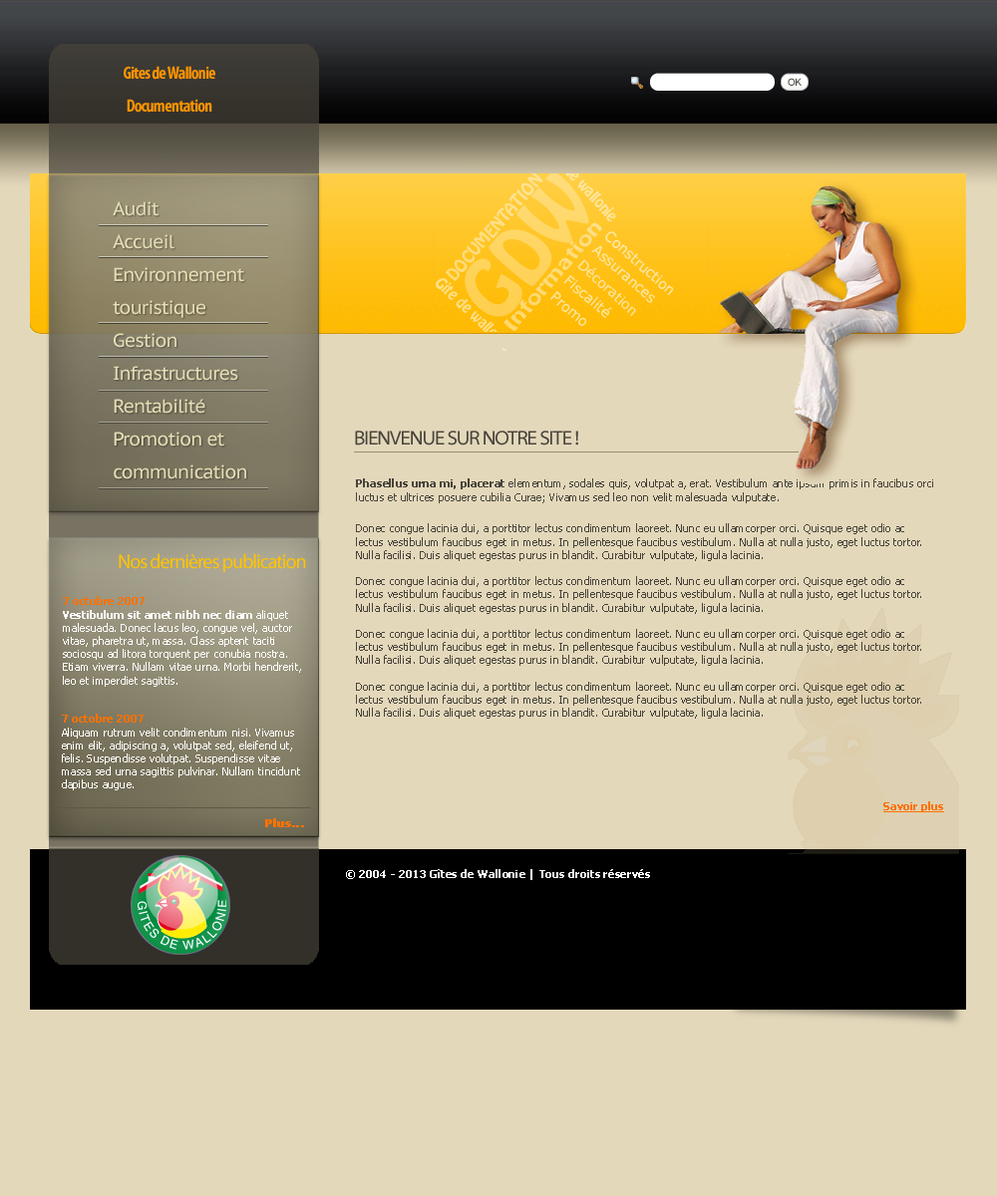
<style>
.page{position:relative;width:997px;height:1196px;background:#e4d8bb}
.page>*{position:absolute;margin:0}
.t1{font:17.9px/32.9px "MyriadPro-BoldCond";letter-spacing:-0.05em;color:#ff9400}
.t2{font:10px "ArialMT";letter-spacing:-0.05em;color:#48443b}
.t3{font:18.9px/32.9px "PTSans-Caption";letter-spacing:-0.05em;color:#e4ddb5}
.t4{font:19.9px "MyriadWebPro";letter-spacing:-0.05em;color:#48443b}
.t5{font:11px "Tahoma";color:#48443b}
.t6{font:11px "Tahoma-Bold";color:#48443b}
.t7{font:19.9px "MyriadPro-Regular";letter-spacing:-0.05em;color:#ffc400}
.t8{font:11px "Tahoma";color:#ffffff}
.t9{font:11px "Tahoma-Bold";color:#ff7200}
.t10{font:11px "Tahoma-Bold";color:#ffffff}
.t11{font:11px "Tahoma-Bold";color:#ff7200;text-decoration:underline}
.t12{font:11px "Tahoma-Bold";color:#ff7200;font-weight:bold}
</style>
<div class="page">
<p class="t1" style="left:124px;top:66px;width:91px;height:47px;text-align:center">Gites de Wallonie<br>Documentation</p>
<p class="t2" style="left:788px;top:78px;width:13px;height:8px">OK</p>
<p class="t3" style="left:113px;top:201px;width:133px;height:278px">Audit<br>Accueil<br>Environnement <br>touristique<br>Gestion<br>Infrastructures<br>Rentabilité<br>Promotion et <br>communication</p>
<p class="t4" style="left:355px;top:431px;width:223px;height:15px">BIENVENUE SUR NOTRE SITE !</p>
<p class="t5" style="left:356px;top:478px;width:577px;height:25px"><span class="t6">Phasellus urna mi, placerat</span> elementum, sodales quis, volutpat a, erat. Vestibulum ante ipsum primis in faucibus orci luctus et ultrices posuere cubilia Curae; Vivamus sed leo non velit malesuada vulputate.</p>
<p class="t5" style="left:356px;top:523px;width:565px;height:196px">Donec congue lacinia dui, a porttitor lectus condimentum laoreet. Nunc eu ullamcorper orci. Quisque eget odio ac lectus vestibulum faucibus eget in metus. In pellentesque faucibus vestibulum. Nulla at nulla justo, eget luctus tortor. Nulla facilisi. Duis aliquet egestas purus in blandit. Curabitur vulputate, ligula lacinia.<br><br>Donec congue lacinia dui, a porttitor lectus condimentum laoreet. Nunc eu ullamcorper orci. Quisque eget odio ac lectus vestibulum faucibus eget in metus. In pellentesque faucibus vestibulum. Nulla at nulla justo, eget luctus tortor. Nulla facilisi. Duis aliquet egestas purus in blandit. Curabitur vulputate, ligula lacinia.<br><br>Donec congue lacinia dui, a porttitor lectus condimentum laoreet. Nunc eu ullamcorper orci. Quisque eget odio ac lectus vestibulum faucibus eget in metus. In pellentesque faucibus vestibulum. Nulla at nulla justo, eget luctus tortor. Nulla facilisi. Duis aliquet egestas purus in blandit. Curabitur vulputate, ligula lacinia.<br><br>Donec congue lacinia dui, a porttitor lectus condimentum laoreet. Nunc eu ullamcorper orci. Quisque eget odio ac lectus vestibulum faucibus eget in metus. In pellentesque faucibus vestibulum. Nulla at nulla justo, eget luctus tortor. Nulla facilisi. Duis aliquet egestas purus in blandit. Curabitur vulputate, ligula lacinia.</p>
<p class="t7" style="left:119px;top:553px;width:187px;height:19px">Nos dernières publication</p>
<p class="t8" style="left:63px;top:596px;width:238px;height:91px"><span class="t9">7 octobre 2007<br></span><span class="t10">Vestibulum sit amet nibh nec diam</span> aliquet malesuada. Donec lacus leo, congue vel, auctor vitae, pharetra ut, massa. Class aptent taciti sociosqu ad litora torquent per conubia nostra. Etiam viverra. Nullam vitae urna. Morbi hendrerit, leo et imperdiet sagittis.</p>
<p class="t8" style="left:62px;top:714px;width:238px;height:76px"><span class="t9">7 octobre 2007<br></span>Aliquam rutrum velit condimentum nisi. Vivamus enim elit, adipiscing a, volutpat sed, eleifend ut, felis. Suspendisse volutpat. Suspendisse vitae massa sed urna sagittis pulvinar. Nullam tincidunt dapibus augue.</p>
<p class="t11" style="left:883px;top:801px;width:61px;height:11px">Savoir plus</p>
<p class="t12" style="left:265px;top:818px;width:39px;height:9px">Plus...</p>
<p class="t10" style="left:346px;top:869px;width:304px;height:11px">© 2004 - 2013 Gîtes de Wallonie | Tous droits réservés</p>
</div>
